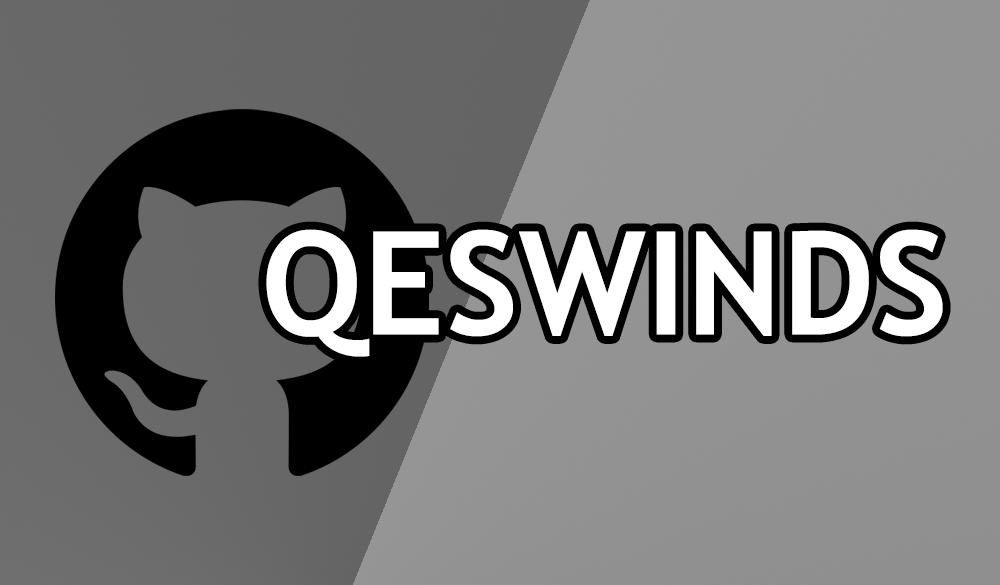
<style>
.page{position:relative;width:1000px;height:585px}
.page>*{position:absolute;margin:0}
.t1{font:144px "TrebuchetMS-Bold";color:#ffffff;text-transform:uppercase}
</style>
<div class="page">
<p class="t1" style="left:266px;top:229px;width:677px;height:128px">QESWinds</p>
</div>
